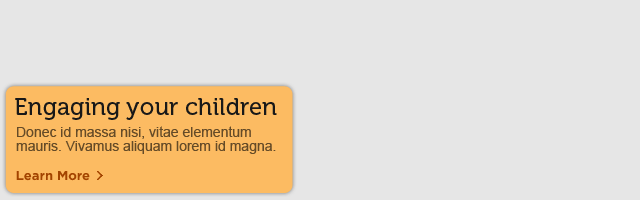
<style>
.page{position:relative;width:640px;height:200px;background:#e6e6e6}
.page>*{position:absolute;margin:0}
.t1{font:24px "Museo-500";color:#191818}
.t2{font:14px/14px "ArialMT";color:#654b27}
.t3{font:13px "Gotham-Bold";color:#a34400}
</style>
<div class="page">
<p class="t1" style="left:15px;top:98px;width:262px;height:22px">Engaging your children</p>
<p class="t2" style="left:16px;top:126px;width:260px;height:28px">Donec id massa nisi, vitae elementum mauris. Vivamus aliquam lorem id magna.</p>
<p class="t3" style="left:16px;top:171px;width:74px;height:10px">Learn More</p>
</div>
